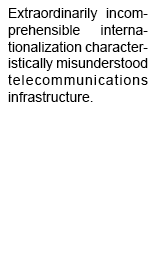
<style>
.page{position:relative;width:160px;height:256px;background:#ffffff}
.page>*{position:absolute;margin:0}
.t1{font:14px "ArialMT";color:#000000}
</style>
<div class="page">
<p class="t1" style="left:8px;top:7px;width:140px;height:95px;text-align:justify">Extraordinarily incomprehensible internationalization characteristically misunderstood telecommunications infrastructure.</p>
</div>
